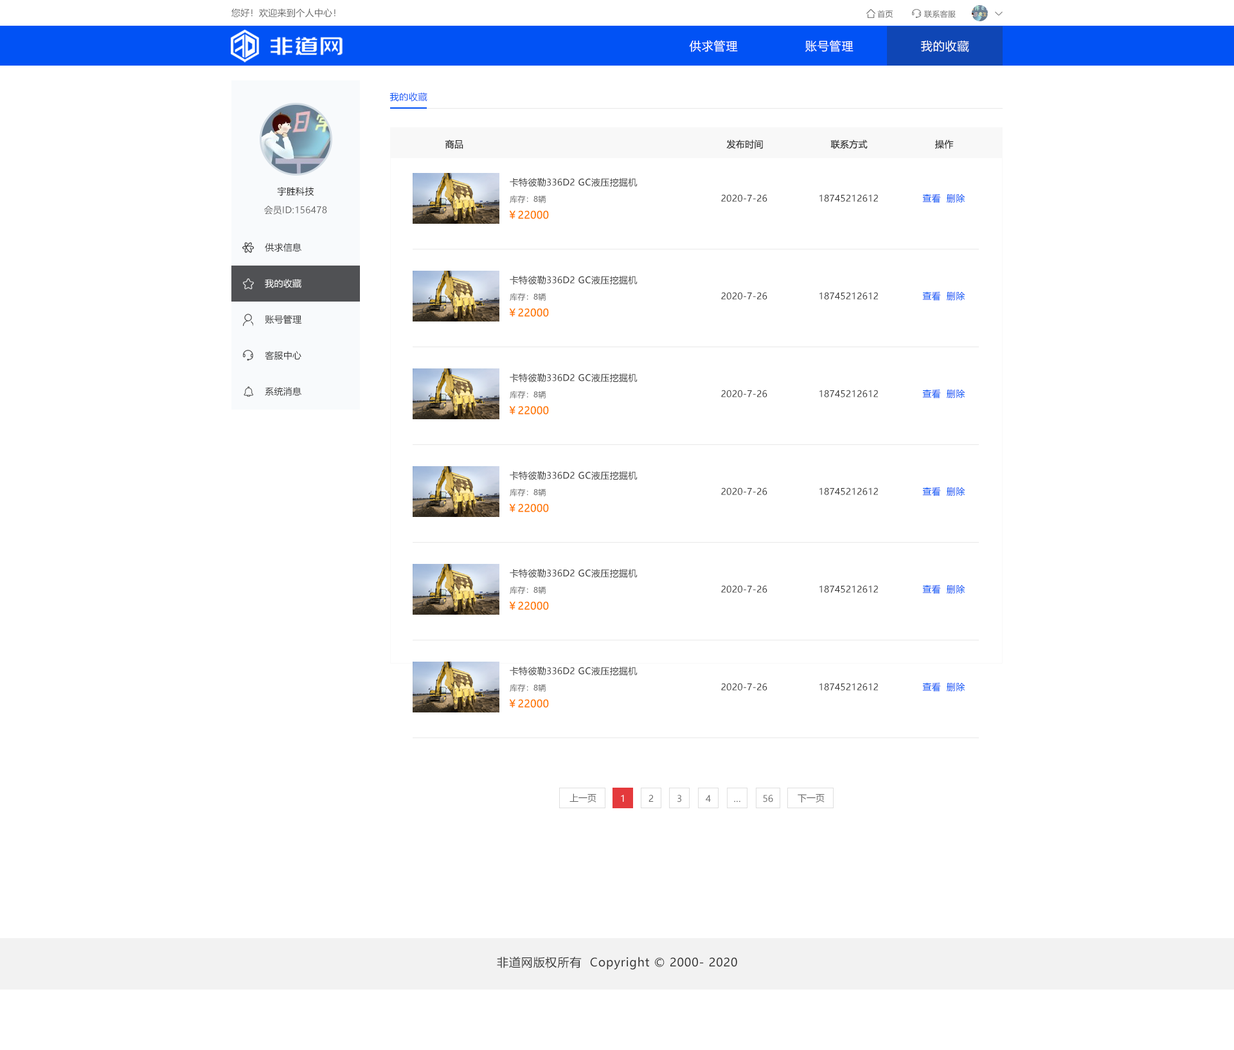
<style>
.page{position:relative;width:1234px;height:1050px;background:#ffffff}
.page>*{position:absolute;margin:0}
.t1{font:9px "MicrosoftYaHei";letter-spacing:0.022em;color:#666666}
.t2{font:7.7px "MicrosoftYaHei";letter-spacing:0.022em;color:#666666}
.t3{font:11.6px "MicrosoftYaHei";letter-spacing:0.05em;color:#ffffff}
.t4{font:9px "MicrosoftYaHei";letter-spacing:0.05em;color:#0152f5}
.t5{font:9px "MicrosoftYaHei";letter-spacing:0.022em;color:#333333}
.t6{font:9px "MicrosoftYaHei";letter-spacing:0.022em;color:#141414}
.t7{font:9px "MicrosoftYaHei";letter-spacing:0.022em;color:#0152f5}
.t8{font:10.3px "MicrosoftYaHei";letter-spacing:0.022em;color:#ff7a00}
.t9{font:9px "MicrosoftYaHei";letter-spacing:0.022em;color:#ffffff}
.t10{font:9px "MicrosoftYaHei";color:#666666}
.t11{font:9px "MicrosoftYaHei";color:#ffffff}
.t12{font:11.6px "MicrosoftYaHei";letter-spacing:0.05em;color:#333333}
</style>
<div class="page">
<p class="t1" style="left:231px;top:8px;width:105px;height:9px">您好！欢迎来到个人中心！</p>
<p class="t2" style="left:878px;top:10px;width:15px;height:8px">首页</p>
<p class="t2" style="left:924px;top:10px;width:32px;height:8px">联系客服</p>
<p class="t3" style="left:689px;top:40px;width:49px;height:12px">供求管理</p>
<p class="t3" style="left:806px;top:40px;width:48px;height:12px">账号管理</p>
<p class="t3" style="left:921px;top:40px;width:48px;height:12px">我的收藏</p>
<p class="t4" style="left:390px;top:92px;width:38px;height:10px">我的收藏</p>
<p class="t5" style="left:445px;top:140px;width:19px;height:9px">商品</p>
<p class="t5" style="left:726px;top:140px;width:37px;height:9px">发布时间</p>
<p class="t5" style="left:831px;top:140px;width:37px;height:9px">联系方式</p>
<p class="t5" style="left:935px;top:140px;width:19px;height:9px">操作</p>
<p class="t5" style="left:510px;top:177px;width:128px;height:10px">卡特彼勒336D2 GC液压挖掘机</p>
<p class="t6" style="left:277px;top:186px;width:37px;height:10px">宇胜科技</p>
<p class="t2" style="left:510px;top:195px;width:36px;height:8px">库存：8辆</p>
<p class="t5" style="left:721px;top:194px;width:47px;height:8px">2020-7-26</p>
<p class="t5" style="left:820px;top:194px;width:58px;height:8px">18745212612</p>
<p class="t7" style="left:923px;top:194px;width:43px;height:9px">查看  删除</p>
<p class="t1" style="left:264px;top:206px;width:63px;height:9px">会员ID:156478</p>
<p class="t8" style="left:509px;top:210px;width:40px;height:9px">￥22000</p>
<p class="t5" style="left:265px;top:243px;width:37px;height:9px">供求信息</p>
<p class="t9" style="left:265px;top:279px;width:37px;height:9px">我的收藏</p>
<p class="t5" style="left:510px;top:275px;width:128px;height:10px">卡特彼勒336D2 GC液压挖掘机</p>
<p class="t2" style="left:510px;top:293px;width:36px;height:8px">库存：8辆</p>
<p class="t5" style="left:721px;top:292px;width:47px;height:8px">2020-7-26</p>
<p class="t5" style="left:820px;top:292px;width:58px;height:8px">18745212612</p>
<p class="t7" style="left:923px;top:291px;width:43px;height:10px">查看  删除</p>
<p class="t5" style="left:265px;top:315px;width:37px;height:9px">账号管理</p>
<p class="t8" style="left:509px;top:308px;width:40px;height:9px">￥22000</p>
<p class="t5" style="left:265px;top:351px;width:37px;height:9px">客服中心</p>
<p class="t5" style="left:510px;top:373px;width:128px;height:9px">卡特彼勒336D2 GC液压挖掘机</p>
<p class="t5" style="left:265px;top:387px;width:37px;height:9px">系统消息</p>
<p class="t5" style="left:721px;top:390px;width:47px;height:7px">2020-7-26</p>
<p class="t5" style="left:820px;top:390px;width:58px;height:7px">18745212612</p>
<p class="t7" style="left:923px;top:389px;width:43px;height:10px">查看  删除</p>
<p class="t2" style="left:510px;top:391px;width:36px;height:8px">库存：8辆</p>
<p class="t8" style="left:509px;top:406px;width:40px;height:9px">￥22000</p>
<p class="t5" style="left:510px;top:471px;width:128px;height:9px">卡特彼勒336D2 GC液压挖掘机</p>
<p class="t2" style="left:510px;top:489px;width:36px;height:7px">库存：8辆</p>
<p class="t5" style="left:721px;top:487px;width:47px;height:8px">2020-7-26</p>
<p class="t5" style="left:820px;top:487px;width:58px;height:8px">18745212612</p>
<p class="t7" style="left:923px;top:487px;width:43px;height:9px">查看  删除</p>
<p class="t8" style="left:509px;top:503px;width:40px;height:9px">￥22000</p>
<p class="t5" style="left:510px;top:568px;width:128px;height:10px">卡特彼勒336D2 GC液压挖掘机</p>
<p class="t2" style="left:510px;top:586px;width:36px;height:8px">库存：8辆</p>
<p class="t5" style="left:721px;top:585px;width:47px;height:8px">2020-7-26</p>
<p class="t5" style="left:820px;top:585px;width:58px;height:8px">18745212612</p>
<p class="t7" style="left:923px;top:584px;width:43px;height:10px">查看  删除</p>
<p class="t8" style="left:509px;top:601px;width:40px;height:9px">￥22000</p>
<p class="t5" style="left:510px;top:666px;width:128px;height:10px">卡特彼勒336D2 GC液压挖掘机</p>
<p class="t2" style="left:510px;top:684px;width:36px;height:8px">库存：8辆</p>
<p class="t5" style="left:721px;top:683px;width:47px;height:7px">2020-7-26</p>
<p class="t5" style="left:820px;top:683px;width:58px;height:7px">18745212612</p>
<p class="t7" style="left:923px;top:682px;width:43px;height:10px">查看  删除</p>
<p class="t8" style="left:509px;top:699px;width:40px;height:9px">￥22000</p>
<p class="t10" style="left:570px;top:793px;width:27px;height:9px">上一页</p>
<p class="t11" style="left:621px;top:795px;width:3px;height:7px">1</p>
<p class="t10" style="left:649px;top:795px;width:5px;height:7px">2</p>
<p class="t10" style="left:678px;top:795px;width:3px;height:7px">3</p>
<p class="t10" style="left:706px;top:795px;width:5px;height:7px">4</p>
<p class="t10" style="left:763px;top:795px;width:10px;height:7px">56</p>
<p class="t10" style="left:798px;top:794px;width:27px;height:8px">下一页</p>
<p class="t10" style="left:734px;top:800px;width:7px;height:2px">…</p>
<p class="t12" style="left:497px;top:956px;width:240px;height:13px">非道网版权所有  Copyright © 2000- 2020</p>
</div>
